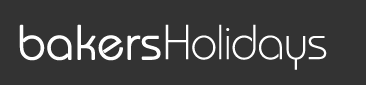
<style>
.page{position:relative;width:366px;height:85px;background:#333333}
.page>*{position:absolute;margin:0}
.t1{font:48px "BauhausITCbyBT-Light";letter-spacing:0.005em;color:#ffffff;font-weight:bold}
.t2{font:49px "BauhausITCbyBT-Light";letter-spacing:-0.015em;color:#ffffff}
</style>
<div class="page">
<p class="t1" style="left:19px;top:24px;width:142px;height:37px">bakers</p>
<p class="t2" style="left:165px;top:24px;width:162px;height:46px">Holidays</p>
</div>
